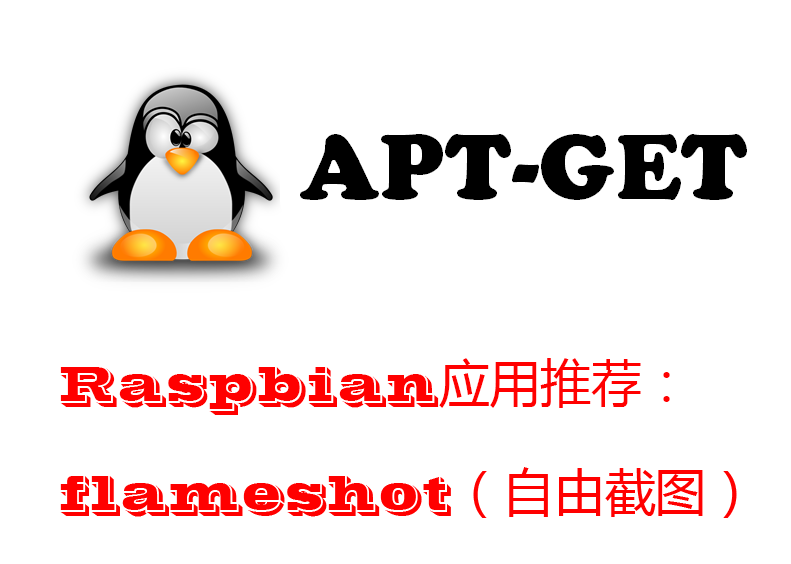
<style>
.page{position:relative;width:791px;height:564px;background:#ffffff}
.page>*{position:absolute;margin:0}
.t1{font:50.6px/109.3px "VinetaBT-Regular";color:#ff0000}
.t2{font:50.6px/109.3px "MicrosoftYaHei";color:#ff0000}
</style>
<div class="page">
<p class="t1" style="left:60px;top:358px;width:677px;height:160px">Raspbian<span class="t2">应用推荐：</span><br>flameshot<span class="t2">（自由截图）</span></p>
</div>
